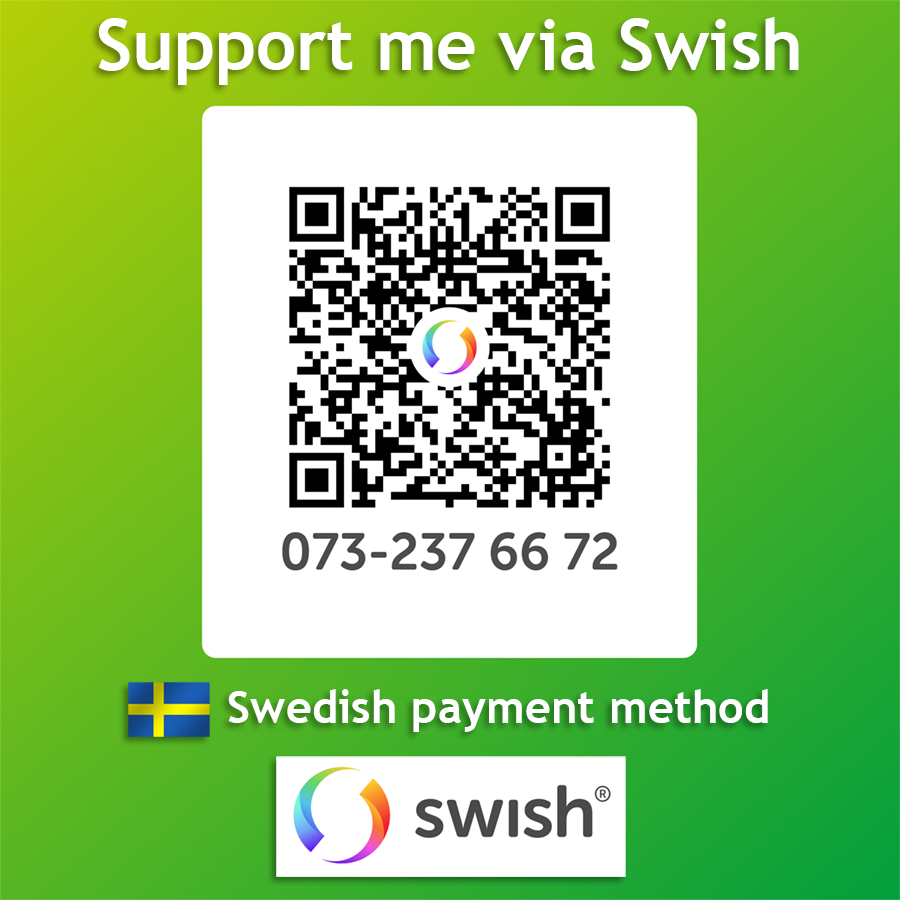
<style>
.page{position:relative;width:900px;height:900px;background:#ffffff}
.page>*{position:absolute;margin:0}
.t1{font:70.7px "TrebuchetMS-Bold";color:#ffffff}
.t2{font:45.2px "TrebuchetMS-Bold";color:#ffffff}
</style>
<div class="page">
<p class="t1" style="left:98px;top:17px;width:701px;height:68px">Support me via Swish</p>
<p class="t2" style="left:228px;top:689px;width:540px;height:43px">Swedish payment method</p>
</div>
